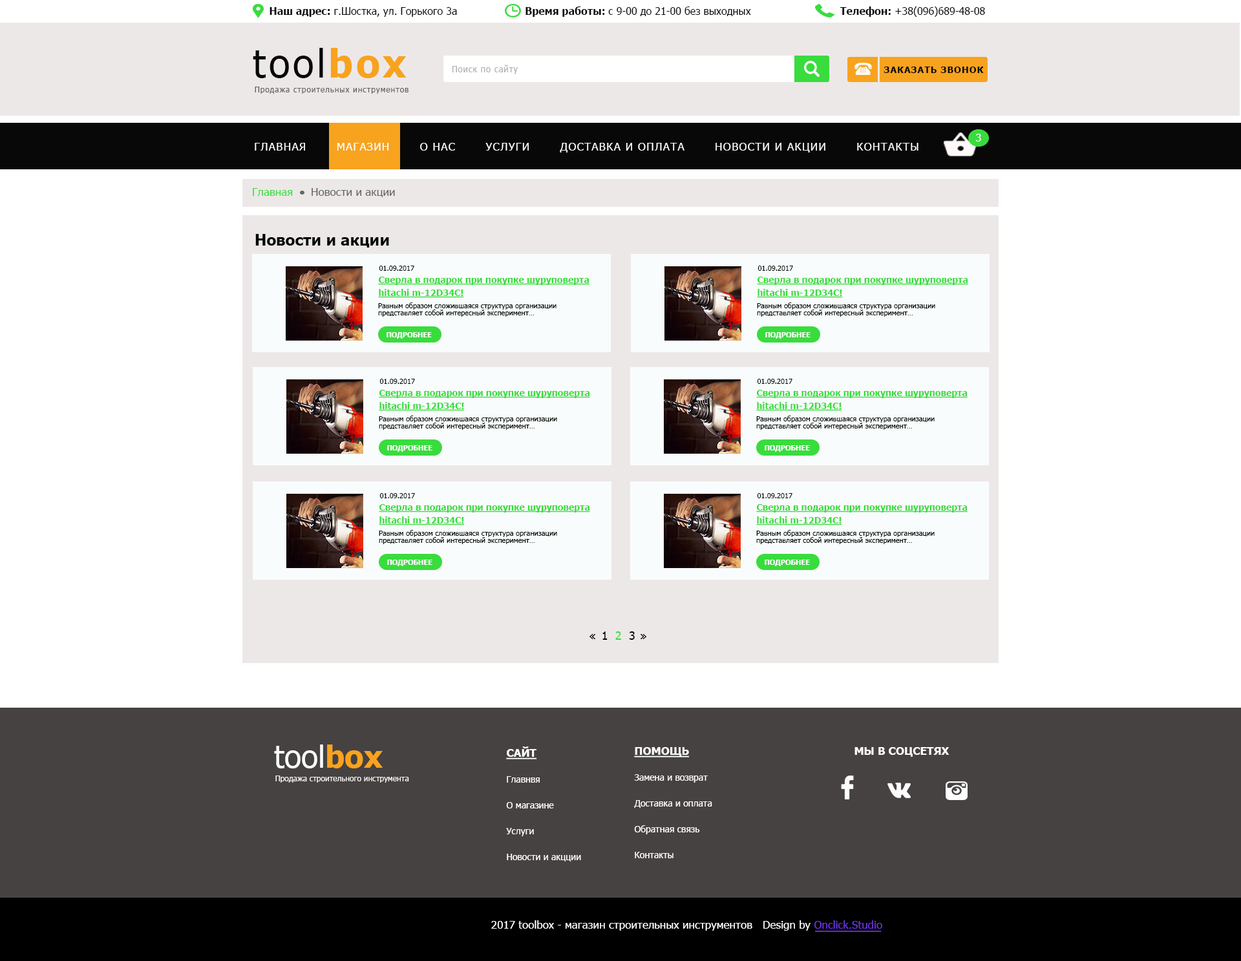
<style>
.page{position:relative;width:1241px;height:961px;background:#ffffff}
.page>*{position:absolute;margin:0}
.t1{font:10.3px "Tahoma";color:#080808}
.t2{font:10.3px "Tahoma-Bold";color:#080808}
.t3{font:38.8px "Tahoma";letter-spacing:0.075em;color:#080808}
.t4{font:38.8px "Tahoma-Bold";letter-spacing:0.075em;color:#f7a31e}
.t5{font:9px "Tahoma";letter-spacing:0.075em;color:#b1b1b1;scale:0.92 1}
.t6{font:9px "Tahoma-Bold";letter-spacing:0.075em;color:#080808;text-transform:uppercase}
.t7{font:7.8px "Tahoma";letter-spacing:0.075em;color:#5f5f60}
.t8{font:11px "Tahoma";letter-spacing:0.075em;color:#fafafb;text-transform:uppercase}
.t9{font:11px "Tahoma";letter-spacing:0.075em;color:#ffffff;text-transform:uppercase}
.t10{font:11px "Tahoma";color:#39dc3d}
.t11{font:11px "Tahoma";color:#646764}
.t12{font:15.5px "Tahoma-Bold";color:#000400}
.t13{font:7.1px "Tahoma";color:#000700}
.t14{font:9px/12.9px "Tahoma-Bold";color:#39dc3d;text-decoration:underline}
.t15{font:7.1px/7.1px "Tahoma";color:#000700}
.t16{font:7.1px "Tahoma-Bold";color:#ffffff;text-transform:uppercase}
.t17{font:11.6px "Tahoma";color:#000700}
.t18{font:11.6px "Tahoma";color:#39dc3d}
.t19{font:31px "Tahoma";color:#fffefe}
.t20{font:31px "Tahoma-Bold";color:#f7a31e}
.t21{font:9px/12.9px "Tahoma";color:#fffefe}
.t22{font:11px/12.9px "Tahoma-Bold";color:#fffefe;text-transform:uppercase;text-decoration:underline}
.t23{font:11px "Tahoma-Bold";color:#fffefe;text-transform:uppercase}
.t24{font:7.8px "Tahoma";color:#fbf7f7}
.t25{font:11px "Tahoma";color:#fffefe}
.t26{font:11px "Tahoma";color:#6c37e3}
</style>
<div class="page">
<p class="t1" style="left:269px;top:7px;width:188px;height:10px"><span class="t2">Наш адрес:</span> г.Шостка, ул. Горького 3а</p>
<p class="t1" style="left:525px;top:6px;width:226px;height:11px"><span class="t2">Время работы: </span>с 9-00 до 21-00 без выходных</p>
<p class="t1" style="left:839px;top:6px;width:146px;height:11px"><span class="t2">Телефон: </span>+38(096)689-48-08</p>
<p class="t3" style="left:253px;top:48px;width:154px;height:30px">tool<span class="t4">box</span></p>
<p class="t5" style="left:452px;top:65px;width:66px;height:9px">Поиск по сайту</p>
<p class="t6" style="left:883px;top:67px;width:101px;height:6px">Заказать звонок</p>
<p class="t7" style="left:255px;top:87px;width:153px;height:7px">Продажа строительных инструментов</p>
<p class="t8" style="left:975px;top:134px;width:6px;height:8px">3</p>
<p class="t8" style="left:255px;top:143px;width:663px;height:10px">Главная       <span class="t9">Магазин</span>       О нас       Услуги       Доставка и оплата       Новости и акции       Контакты</p>
<p class="t10" style="left:253px;top:188px;width:40px;height:8px">Главная</p>
<p class="t11" style="left:311px;top:188px;width:84px;height:9px">Новости и акции</p>
<p class="t12" style="left:255px;top:234px;width:134px;height:14px">Новости и акции</p>
<p class="t13" style="left:379px;top:266px;width:35px;height:5px">01.09.2017</p>
<p class="t13" style="left:757px;top:266px;width:36px;height:5px">01.09.2017</p>
<p class="t14" style="left:378px;top:277px;width:211px;height:21px">Сверла в подарок при покупке шуруповерта<br>hitachi m-12D34C!</p>
<p class="t14" style="left:757px;top:277px;width:211px;height:21px">Сверла в подарок при покупке шуруповерта<br>hitachi m-12D34C!</p>
<p class="t15" style="left:378px;top:302px;width:178px;height:15px">Равным образом сложившаяся структура организации представляет собой интересный эксперимент…</p>
<p class="t15" style="left:757px;top:302px;width:178px;height:15px">Равным образом сложившаяся структура организации представляет собой интересный эксперимент…</p>
<p class="t16" style="left:386px;top:332px;width:46px;height:7px">Подробнее</p>
<p class="t16" style="left:765px;top:332px;width:45px;height:7px">Подробнее</p>
<p class="t14" style="left:379px;top:390px;width:211px;height:21px">Сверла в подарок при покупке шуруповерта<br>hitachi m-12D34C!</p>
<p class="t13" style="left:379px;top:379px;width:36px;height:5px">01.09.2017</p>
<p class="t14" style="left:756px;top:390px;width:211px;height:21px">Сверла в подарок при покупке шуруповерта<br>hitachi m-12D34C!</p>
<p class="t13" style="left:757px;top:379px;width:35px;height:5px">01.09.2017</p>
<p class="t15" style="left:379px;top:416px;width:178px;height:14px">Равным образом сложившаяся структура организации представляет собой интересный эксперимент…</p>
<p class="t15" style="left:756px;top:416px;width:178px;height:14px">Равным образом сложившаяся структура организации представляет собой интересный эксперимент…</p>
<p class="t16" style="left:387px;top:445px;width:45px;height:7px">Подробнее</p>
<p class="t16" style="left:765px;top:445px;width:45px;height:7px">Подробнее</p>
<p class="t13" style="left:379px;top:493px;width:36px;height:5px">01.09.2017</p>
<p class="t13" style="left:757px;top:493px;width:35px;height:5px">01.09.2017</p>
<p class="t14" style="left:379px;top:504px;width:211px;height:21px">Сверла в подарок при покупке шуруповерта<br>hitachi m-12D34C!</p>
<p class="t14" style="left:756px;top:504px;width:211px;height:21px">Сверла в подарок при покупке шуруповерта<br>hitachi m-12D34C!</p>
<p class="t15" style="left:379px;top:530px;width:178px;height:14px">Равным образом сложившаяся структура организации представляет собой интересный эксперимент…</p>
<p class="t15" style="left:756px;top:530px;width:178px;height:14px">Равным образом сложившаяся структура организации представляет собой интересный эксперимент…</p>
<p class="t16" style="left:387px;top:560px;width:45px;height:6px">Подробнее</p>
<p class="t16" style="left:765px;top:560px;width:45px;height:6px">Подробнее</p>
<p class="t17" style="left:602px;top:631px;width:33px;height:9px">1  <span class="t18">2 </span> 3</p>
<p class="t19" style="left:274px;top:744px;width:109px;height:24px">tool<span class="t20">box</span></p>
<p class="t21" style="left:506px;top:746px;width:75px;height:115px"><span class="t22">сайт<br><br></span>Главнвя<br><br>О магазине<br><br>Услуги<br><br>Новости и акцции</p>
<p class="t21" style="left:634px;top:747px;width:78px;height:111px"><span class="t22">Помощь<br><br></span>Замена и возврат<br><br>Доставка и оплата<br><br>Обратная связь<br><br>Контакты</p>
<p class="t23" style="left:854px;top:747px;width:95px;height:10px">Мы в соцсетях</p>
<p class="t24" style="left:275px;top:776px;width:134px;height:7px">Продажа строительного инструмента</p>
<p class="t25" style="left:491px;top:920px;width:391px;height:11px">2017 toolbox - магазин строительных инструментов   Design by <span class="t26">Onclick.Studio</span></p>
</div>
